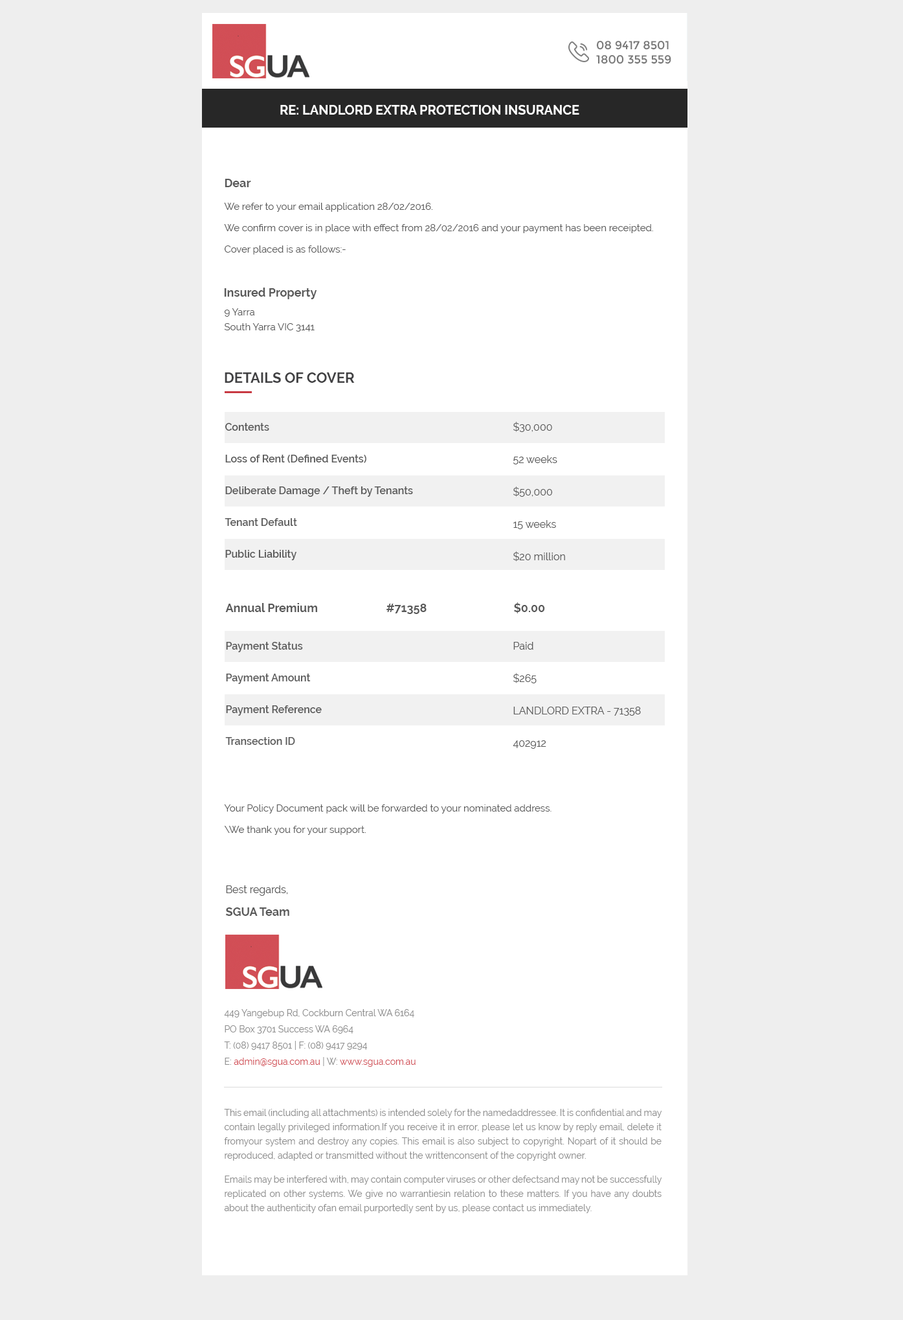
<style>
.page{position:relative;width:903px;height:1320px;background:#eeeeee}
.page>*{position:absolute;margin:0}
.t1{font:11.7px "Montserrat-Regular";color:#777777}
.t2{font:13px "Raleway-Bold";color:#ffffff;text-transform:uppercase}
.t3{font:11.7px "Raleway-Bold";color:#595959}
.t4{font:9.7px/11.7px "Raleway-Regular";color:#595959}
.t5{font:9.7px/5.2px "Raleway-Regular";color:#595959}
.t6{font:14.2px "Raleway-Bold";color:#414143;text-transform:uppercase}
.t7{font:10.4px/22px "Raleway-SemiBold";color:#595959}
.t8{font:10.4px/19.4px "Raleway-SemiBold";color:#595959}
.t9{font:10.4px/22.7px "Raleway-Regular";color:#595959}
.t10{font:10.4px/13px "Raleway-Regular";color:#595959}
.t11{font:11.7px/13px "Raleway-Bold";color:#595959}
.t12{font:9.1px/6.5px "Raleway-Regular";color:#8d8d8d}
.t13{font:9.1px/6.5px "Raleway-Regular";color:#d24d55}
.t14{font:9.1px/6.5px "Raleway-Regular";color:#d24e56}
.t15{font:9.1px/14.2px "Raleway-Regular";color:#8d8d8d}
</style>
<div class="page">
<p class="t1" style="left:596px;top:41px;width:76px;height:23px">08 9417 8501<br>1800 355 559</p>
<p class="t2" style="left:280px;top:105px;width:300px;height:10px">Re: LANDLORD EXTRA PROTECTION INSURANCE</p>
<p class="t3" style="left:225px;top:179px;width:26px;height:8px">Dear</p>
<p class="t4" style="left:224px;top:203px;width:429px;height:52px">We refer to your email application 28/02/2016.<br>We confirm cover is in place with effect from 28/02/2016 and your payment has been receipted. <br>Cover placed is as follows:-</p>
<p class="t3" style="left:224px;top:288px;width:93px;height:11px">Insured Property</p>
<p class="t5" style="left:224px;top:308px;width:91px;height:24px">9 Yarra<br>South Yarra VIC 3141</p>
<p class="t6" style="left:225px;top:372px;width:130px;height:11px">Details of Cover</p>
<p class="t7" style="left:225px;top:423px;width:188px;height:137px"><span class="t8">Contents<br></span>Loss of Rent (Defined Events)<br>Deliberate Damage / Theft by Tenants<br>Tenant Default<br>Public Liability</p>
<p class="t9" style="left:513px;top:422px;width:52px;height:139px">$30,000<br>52 weeks<br>$50,000<br>15 weeks<br>$20 million</p>
<p class="t3" style="left:225px;top:603px;width:92px;height:9px">Annual Premium</p>
<p class="t3" style="left:387px;top:604px;width:40px;height:10px">#71358</p>
<p class="t3" style="left:514px;top:602px;width:31px;height:11px">$0.00</p>
<p class="t7" style="left:225px;top:642px;width:97px;height:103px">Payment Status<br>Payment Amount<br>Payment Reference<br>Transection ID</p>
<p class="t9" style="left:513px;top:642px;width:128px;height:107px">Paid<br>$265<br>LANDLORD EXTRA - 71358<br>402912</p>
<p class="t4" style="left:224px;top:804px;width:328px;height:31px">Your Policy Document pack will be forwarded to your nominated address.<br>\We thank you for your support.</p>
<p class="t10" style="left:225px;top:885px;width:64px;height:31px">Best regards,<br><span class="t11">SGUA Team</span></p>
<p class="t12" style="left:224px;top:1009px;width:192px;height:58px">449 Yangebup Rd, Cockburn Central WA 6164<br>PO Box 3701 Success WA 6964 <br>T: (08) 9417 8501 | F: (08) 9417 9294<br>E: <span class="t13">admin@sgua.com.au </span>| W: <span class="t14">www.sgua.com.au</span></p>
<p class="t15" style="left:224px;top:1109px;width:439px;height:104px;text-align:justify">This email (including all attachments) is intended solely for the namedaddressee. It is confidential and may contain legally privileged information.If you receive it in error, please let us know by reply email, delete it fromyour system and destroy any copies. This email is also subject to copyright. Nopart of it should be reproduced, adapted or transmitted without the writtenconsent of the copyright owner.<br>Emails may be interfered with, may contain computer viruses or other defectsand may not be successfully replicated on other systems. We give no warrantiesin relation to these matters. If you have any doubts about the authenticity ofan email purportedly sent by us, please contact us immediately.</p>
</div>
